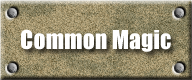
<style>
.page{position:relative;width:192px;height:80px}
.page>*{position:absolute;margin:0}
.t1{font:24px "Impact";color:#ffffff}
</style>
<div class="page">
<p class="t1" style="left:21px;top:29px;width:150px;height:23px">Common Magic</p>
</div>
